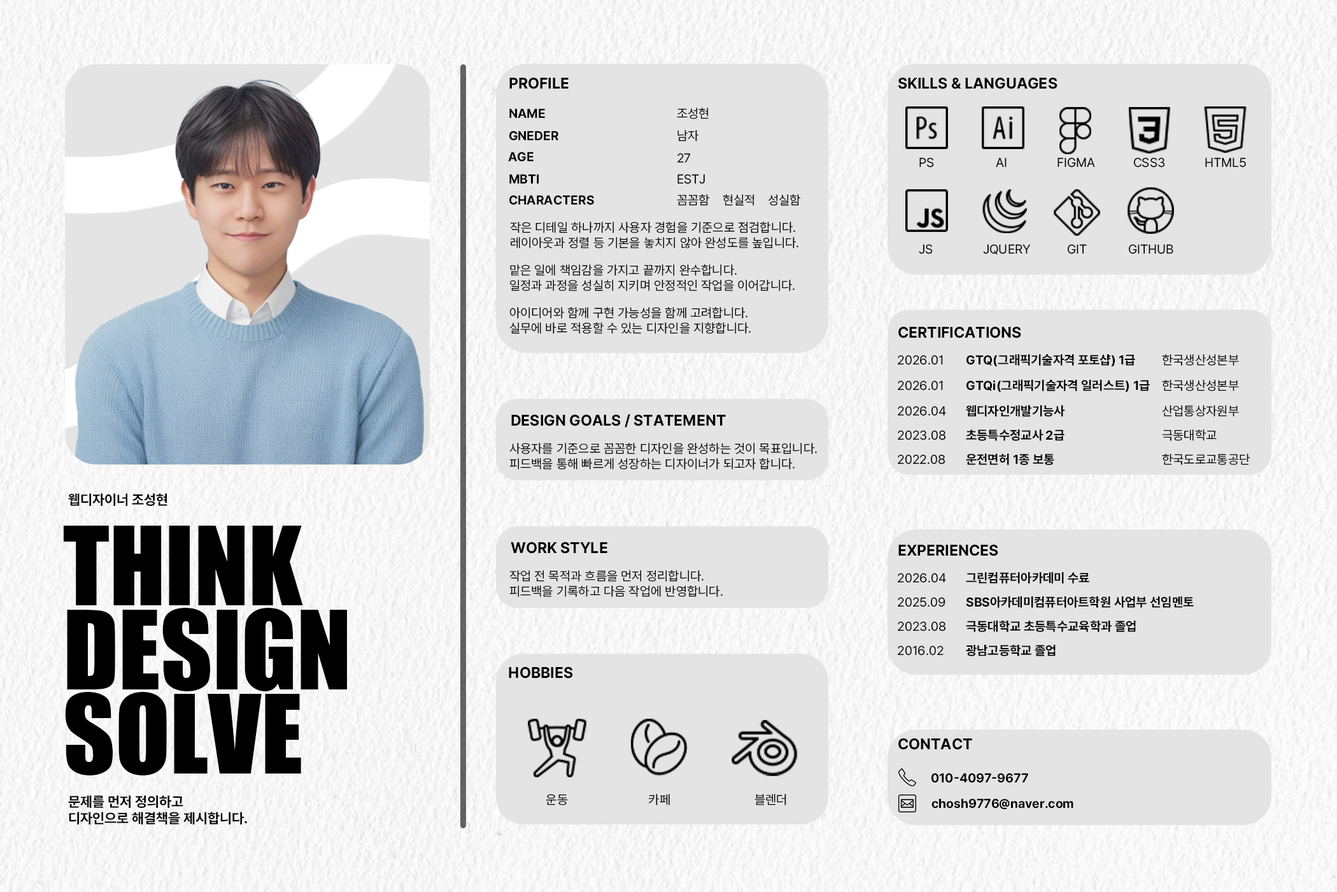
<style>
.page{position:relative;width:1337px;height:892px;background:#e4e4e4}
.page>*{position:absolute;margin:0}
.t1{font:15.3px "Pretendard-Bold";color:#000000}
.t2{font:12.7px "Pretendard-Bold";color:#000000}
.t3{font:12.7px "Pretendard-Regular";color:#000000}
.t4{font:12.7px/15.3px "Pretendard-Regular";color:#000000}
.t5{font:14px "Pretendard-Bold";color:#000000}
.t6{font:100.6px/84.1px "Impact";color:#000000}
.t7{font:14px/16.8px "Pretendard-Bold";color:#000000}
</style>
<div class="page">
<p class="t1" style="left:509px;top:77px;width:60px;height:12px">PROFILE</p>
<p class="t1" style="left:898px;top:77px;width:160px;height:12px">SKILLS &amp; LANGUAGES</p>
<p class="t2" style="left:509px;top:108px;width:36px;height:10px">NAME</p>
<p class="t3" style="left:677px;top:108px;width:32px;height:11px">조성현</p>
<p class="t2" style="left:509px;top:131px;width:50px;height:10px">GNEDER</p>
<p class="t3" style="left:678px;top:130px;width:21px;height:11px">남자</p>
<p class="t2" style="left:508px;top:152px;width:26px;height:10px">AGE</p>
<p class="t3" style="left:678px;top:153px;width:12px;height:9px">27</p>
<p class="t3" style="left:920px;top:157px;width:14px;height:10px">PS</p>
<p class="t3" style="left:996px;top:157px;width:11px;height:10px">AI</p>
<p class="t3" style="left:1058px;top:157px;width:37px;height:10px">FIGMA</p>
<p class="t3" style="left:1134px;top:157px;width:31px;height:10px">CSS3</p>
<p class="t3" style="left:1206px;top:157px;width:40px;height:10px">HTML5</p>
<p class="t2" style="left:509px;top:174px;width:30px;height:9px">MBTI</p>
<p class="t3" style="left:678px;top:174px;width:27px;height:10px">ESTJ</p>
<p class="t2" style="left:509px;top:195px;width:85px;height:10px">CHARACTERS</p>
<p class="t3" style="left:677px;top:194px;width:32px;height:12px">꼼꼼함</p>
<p class="t3" style="left:723px;top:194px;width:31px;height:12px">현실적</p>
<p class="t3" style="left:768px;top:194px;width:33px;height:12px">성실함</p>
<p class="t4" style="left:510px;top:222px;width:289px;height:26px">작은 디테일 하나까지 사용자 경험을 기준으로 점검합니다.<br>레이아웃과 정렬 등 기본을 놓치지 않아 완성도를 높입니다.</p>
<p class="t3" style="left:919px;top:244px;width:14px;height:10px">JS</p>
<p class="t3" style="left:983px;top:244px;width:48px;height:11px">JQUERY</p>
<p class="t3" style="left:1068px;top:244px;width:19px;height:10px">GIT</p>
<p class="t3" style="left:1129px;top:244px;width:45px;height:10px">GITHUB</p>
<p class="t4" style="left:510px;top:264px;width:285px;height:27px">맡은 일에 책임감을 가지고 끝까지 완수합니다.<br>일정과 과정을 성실히 지키며 안정적인 작업을 이어갑니다.</p>
<p class="t4" style="left:509px;top:307px;width:242px;height:27px">아이디어와 함께 구현 가능성을 함께 고려합니다.<br>실무에 바로 적용할 수 있는 디자인을 지향합니다.</p>
<p class="t1" style="left:899px;top:326px;width:123px;height:12px">CERTIFICATIONS</p>
<p class="t3" style="left:898px;top:355px;width:45px;height:10px">2026.01</p>
<p class="t2" style="left:967px;top:354px;width:169px;height:12px">GTQ(그래픽기술자격 포토샵) 1급</p>
<p class="t3" style="left:1162px;top:354px;width:77px;height:12px">한국생산성본부</p>
<p class="t3" style="left:898px;top:380px;width:45px;height:10px">2026.01</p>
<p class="t2" style="left:967px;top:380px;width:183px;height:12px">GTQi(그래픽기술자격 일러스트) 1급</p>
<p class="t3" style="left:1162px;top:380px;width:77px;height:11px">한국생산성본부</p>
<p class="t1" style="left:511px;top:414px;width:215px;height:13px">DESIGN GOALS / STATEMENT</p>
<p class="t3" style="left:898px;top:406px;width:48px;height:10px">2026.04</p>
<p class="t2" style="left:966px;top:405px;width:99px;height:12px">웹디자인개발기능사</p>
<p class="t3" style="left:1162px;top:405px;width:77px;height:12px">산업통상자원부</p>
<p class="t3" style="left:898px;top:430px;width:48px;height:10px">2023.08</p>
<p class="t2" style="left:966px;top:429px;width:99px;height:12px">초등특수정교사 2급</p>
<p class="t3" style="left:1162px;top:429px;width:55px;height:12px">극동대학교</p>
<p class="t4" style="left:509px;top:443px;width:308px;height:26px">사용자를 기준으로 꼼꼼한 디자인을 완성하는 것이 목표입니다.<br>피드백을 통해 빠르게 성장하는 디자이너가 되고자 합니다.</p>
<p class="t3" style="left:898px;top:454px;width:47px;height:10px">2022.08</p>
<p class="t2" style="left:966px;top:453px;width:89px;height:12px">운전면허 1종 보통</p>
<p class="t3" style="left:1162px;top:453px;width:88px;height:12px">한국도로교통공단</p>
<p class="t5" style="left:68px;top:493px;width:99px;height:13px">웹디자이너 조성현</p>
<p class="t6" style="left:63px;top:525px;width:284px;height:250px">THINK<br>DESIGN<br>SOLVE</p>
<p class="t1" style="left:511px;top:541px;width:97px;height:12px">WORK STYLE</p>
<p class="t1" style="left:899px;top:544px;width:100px;height:12px">EXPERIENCES</p>
<p class="t4" style="left:509px;top:570px;width:214px;height:27px">작업 전 목적과 흐름을 먼저 정리합니다.<br>피드백을 기록하고 다음 작업에 반영합니다.</p>
<p class="t3" style="left:898px;top:573px;width:48px;height:10px">2026.04</p>
<p class="t2" style="left:966px;top:572px;width:124px;height:11px">그린컴퓨터아카데미 수료</p>
<p class="t3" style="left:898px;top:597px;width:48px;height:10px">2025.09</p>
<p class="t2" style="left:966px;top:596px;width:228px;height:12px">SBS아카데미컴퓨터아트학원 사업부 선임멘토</p>
<p class="t3" style="left:898px;top:621px;width:48px;height:10px">2023.08</p>
<p class="t2" style="left:966px;top:620px;width:170px;height:12px">극동대학교 초등특수교육학과 졸업</p>
<p class="t3" style="left:898px;top:645px;width:46px;height:10px">2016.02</p>
<p class="t2" style="left:966px;top:645px;width:90px;height:11px">광남고등학교 졸업</p>
<p class="t1" style="left:509px;top:666px;width:64px;height:12px">HOBBIES</p>
<p class="t1" style="left:899px;top:737px;width:73px;height:13px">CONTACT</p>
<p class="t2" style="left:932px;top:773px;width:97px;height:10px">010-4097-9677</p>
<p class="t7" style="left:68px;top:795px;width:179px;height:29px">문제를 먼저 정의하고<br>디자인으로 해결책을 제시합니다.</p>
<p class="t3" style="left:546px;top:794px;width:22px;height:11px">운동</p>
<p class="t3" style="left:649px;top:794px;width:21px;height:11px">카페</p>
<p class="t3" style="left:755px;top:794px;width:32px;height:11px">블렌더</p>
<p class="t2" style="left:932px;top:798px;width:142px;height:11px">chosh9776@naver.com</p>
</div>
